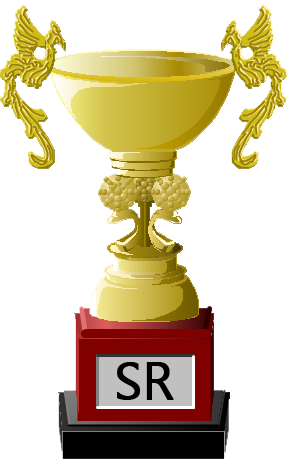
<style>
.page{position:relative;width:292px;height:462px;background:#ffffff}
.page>*{position:absolute;margin:0}
.t1{font:50px "MalgunGothicRegular";color:#000000;font-weight:bold}
</style>
<div class="page">
<p class="t1" style="left:117px;top:362px;width:57px;height:38px">SR</p>
</div>
